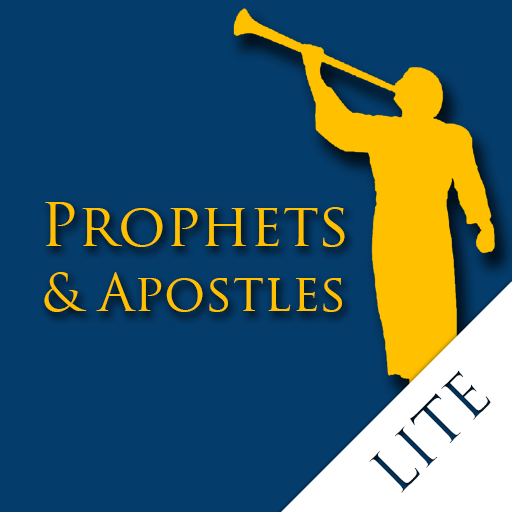
<style>
.page{position:relative;width:512px;height:512px;background:#043c6b}
.page>*{position:absolute;margin:0}
.t1{font:59.3px "TrajanPro-Regular";color:#ffc000}
.t2{font:51.4px "TrajanPro-Regular";color:#ffc000}
.t3{font:59.3px "TrajanPro-Regular";color:#032c4e}
</style>
<div class="page">
<p class="t1" style="left:45px;top:202px;width:300px;height:45px">Prophets</p>
<p class="t2" style="left:44px;top:272px;width:298px;height:40px">&amp; Apostles</p>
<p class="t3" style="left:369px;top:370px;width:122px;height:123px;rotate:-45deg">LITE</p>
</div>
